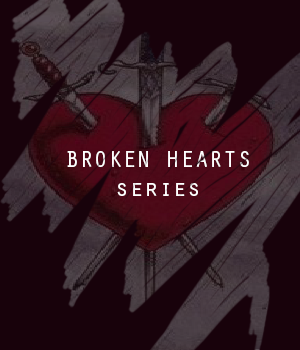
<style>
.page{position:relative;width:300px;height:350px;background:#18020b}
.page>*{position:absolute;margin:0}
.t1{font:24px "OratorStd";color:#ffffff}
</style>
<div class="page">
<p class="t1" style="left:67px;top:151px;width:182px;height:45px;text-align:center">BROKEN HEARTS<br>series</p>
</div>
